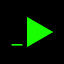
<style>
.page{position:relative;width:64px;height:64px;background:#000000}
.page>*{position:absolute;margin:0}
.t1{font:18px "ArialMT";color:#18ff00}
</style>
<div class="page">
<p class="t1" style="left:11px;top:44px;width:12px;height:2px">_</p>
</div>
